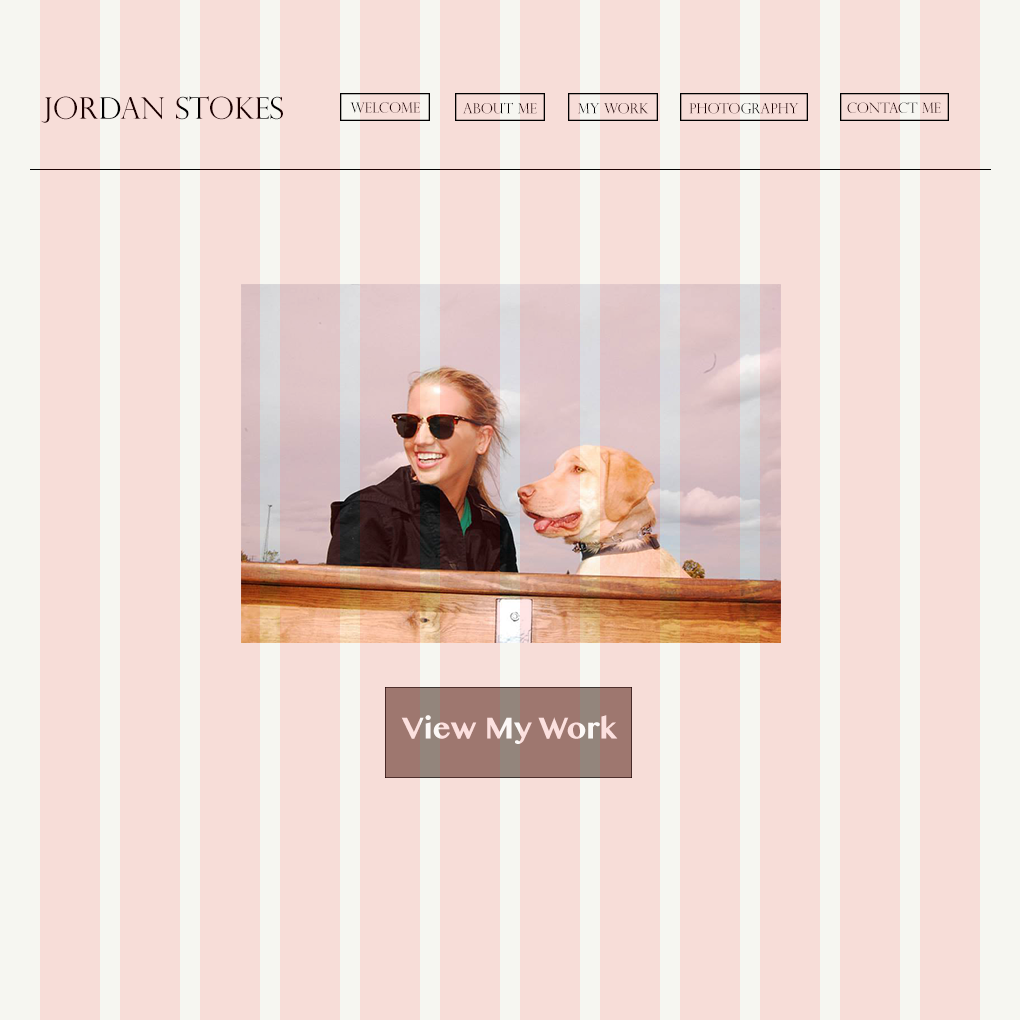
<style>
.page{position:relative;width:1020px;height:1020px;background:#f7ddd8}
.page>*{position:absolute;margin:0}
.t1{font:30px "PerpetuaTitlingMT-Light";color:#1a0000}
.t2{font:14px "PerpetuaTitlingMT-Light";color:#1a0000}
.t3{font:14px "PerpetuaTitlingMT-Light"}
.t4{font:30px "TamilMN-Bold"}
</style>
<div class="page">
<p class="t1" style="left:41px;top:96px;width:242px;height:27px">Jordan Stokes</p>
<p class="t2" style="left:350px;top:102px;width:70px;height:11px">Welcome</p>
<p class="t3" style="left:463px;top:102px;width:74px;height:12px">About me</p>
<p class="t2" style="left:689px;top:102px;width:110px;height:12px">photography</p>
<p class="t2" style="left:847px;top:102px;width:94px;height:11px">contact me</p>
<p class="t3" style="left:578px;top:103px;width:71px;height:11px">My work</p>
<p class="t4" style="left:401px;top:715px;width:217px;height:29px">View My Work</p>
</div>
